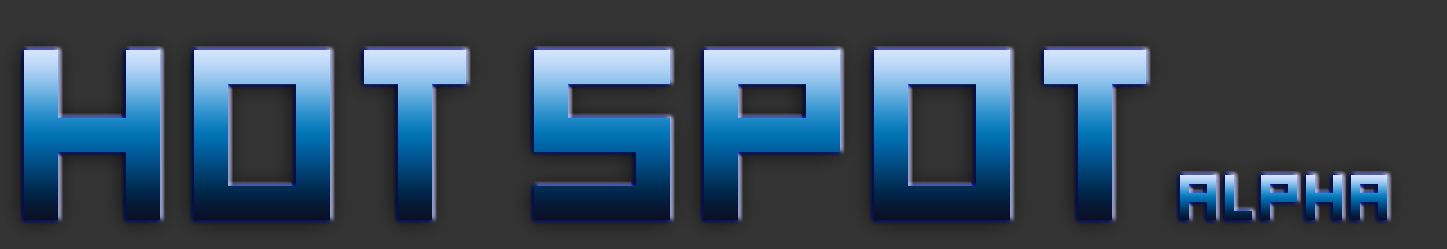
<style>
.page{position:relative;width:1447px;height:249px;background:#333333}
.page>*{position:absolute;margin:0}
.t1{font:272px "hooge05_55Cyr2"}
.t2{font:272px "ImperialOne"}
.t3{font:72px "hooge05_55Cyr2"}
</style>
<div class="page">
<p class="t1" style="left:24px;top:50px;width:1122px;height:170px"><span class="t2"><br></span>Hot spot</p>
<p class="t3" style="left:1180px;top:175px;width:207px;height:45px">alpha</p>
</div>
